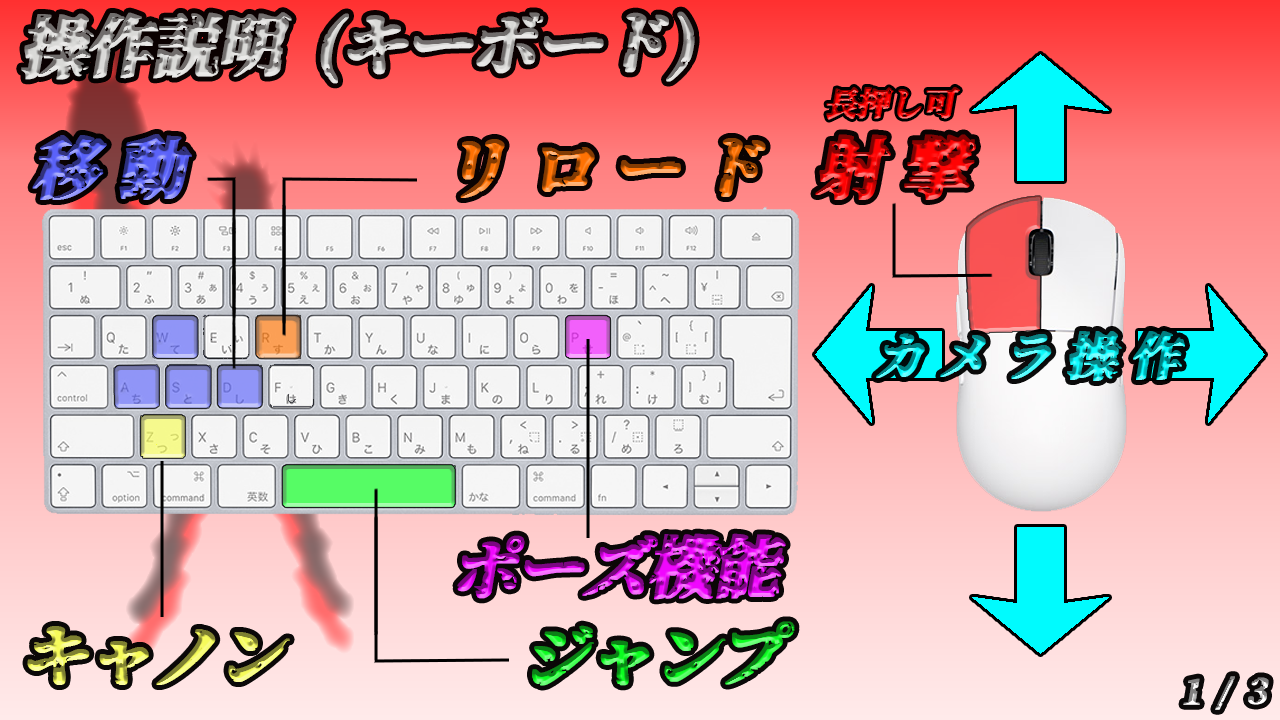
<style>
.page{position:relative;width:1280px;height:720px}
.page>*{position:absolute;margin:0}
.t1{font:66.7px "Genkaimincho";letter-spacing:-0.05em;font-weight:bold;font-style:italic}
.t2{font:33.3px "Genkaimincho";letter-spacing:-0.05em;font-weight:bold;font-style:italic}
.t3{font:66.7px "Genkaimincho";letter-spacing:0.25em;font-weight:bold;font-style:italic}
</style>
<div class="page">
<p class="t1" style="left:21px;top:11px;width:674px;height:73px">操作説明 (キーボード)</p>
<p class="t2" style="left:826px;top:87px;width:134px;height:33px">長押し可</p>
<p class="t3" style="left:32px;top:134px;width:160px;height:66px">移動</p>
<p class="t3" style="left:815px;top:134px;width:161px;height:66px">射撃</p>
<p class="t3" style="left:460px;top:138px;width:306px;height:60px">リロード</p>
<p class="t1" style="left:457px;top:533px;width:329px;height:67px">ポーズ機能</p>
<p class="t1" style="left:532px;top:621px;width:263px;height:65px">ジャンプ</p>
</div>
